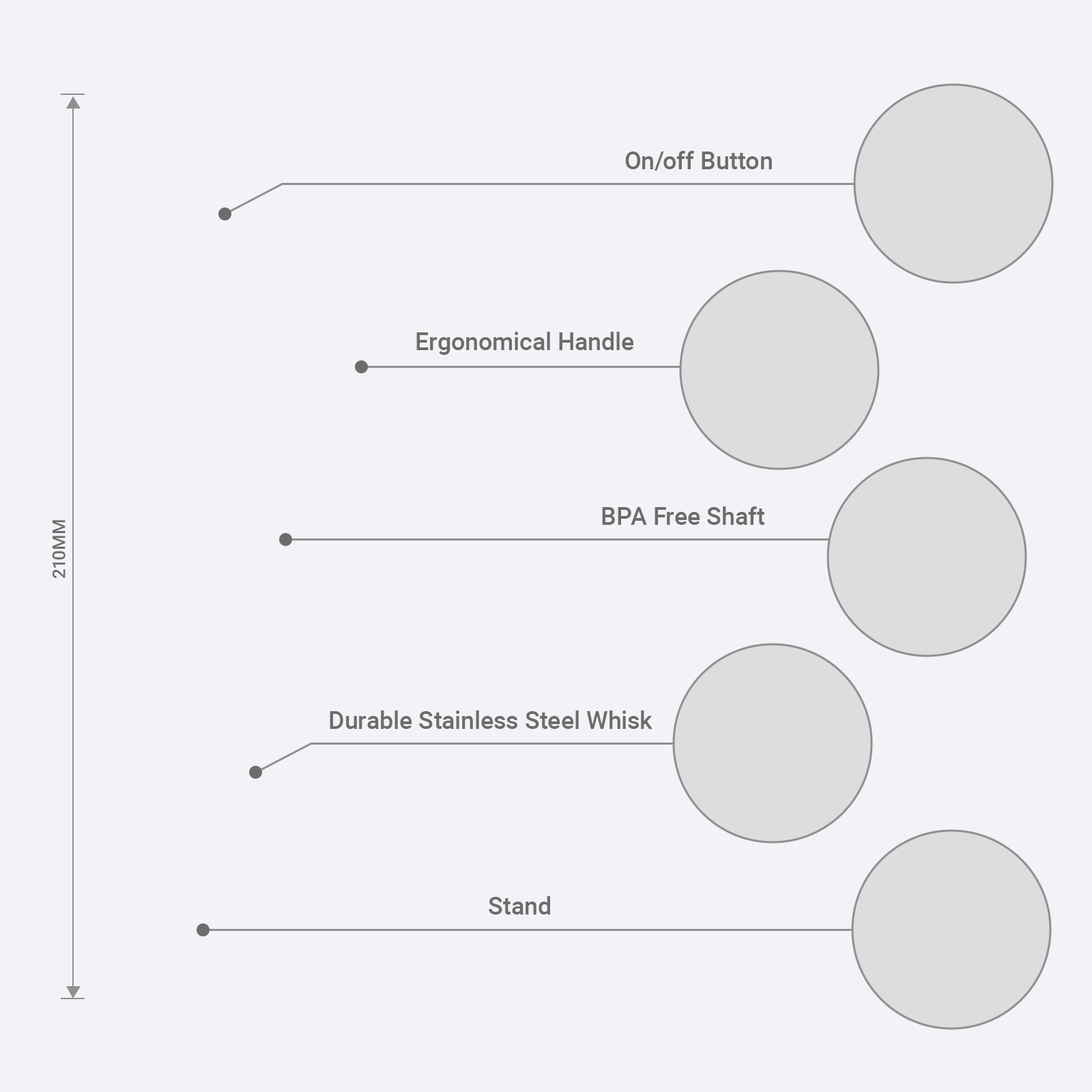
<style>
.page{position:relative;width:1092px;height:1092px;background:#f2f3f6}
.page>*{position:absolute;margin:0}
.t1{font:24.6px "Roboto-Medium";color:#6c6c6c}
.t2{font:17.7px "Roboto-Medium";color:#6c6c6c}
</style>
<div class="page">
<p class="t1" style="left:625px;top:151px;width:147px;height:20px">On/off Button</p>
<p class="t1" style="left:416px;top:332px;width:218px;height:23px">Ergonomical Handle</p>
<p class="t1" style="left:602px;top:506px;width:162px;height:19px">BPA Free Shaft</p>
<p class="t2" style="left:52px;top:520px;width:14px;height:58px;rotate:-90deg">210MM</p>
<p class="t1" style="left:330px;top:710px;width:322px;height:19px">Durable Stainless Steel Whisk</p>
<p class="t1" style="left:489px;top:896px;width:61px;height:19px">Stand</p>
</div>
